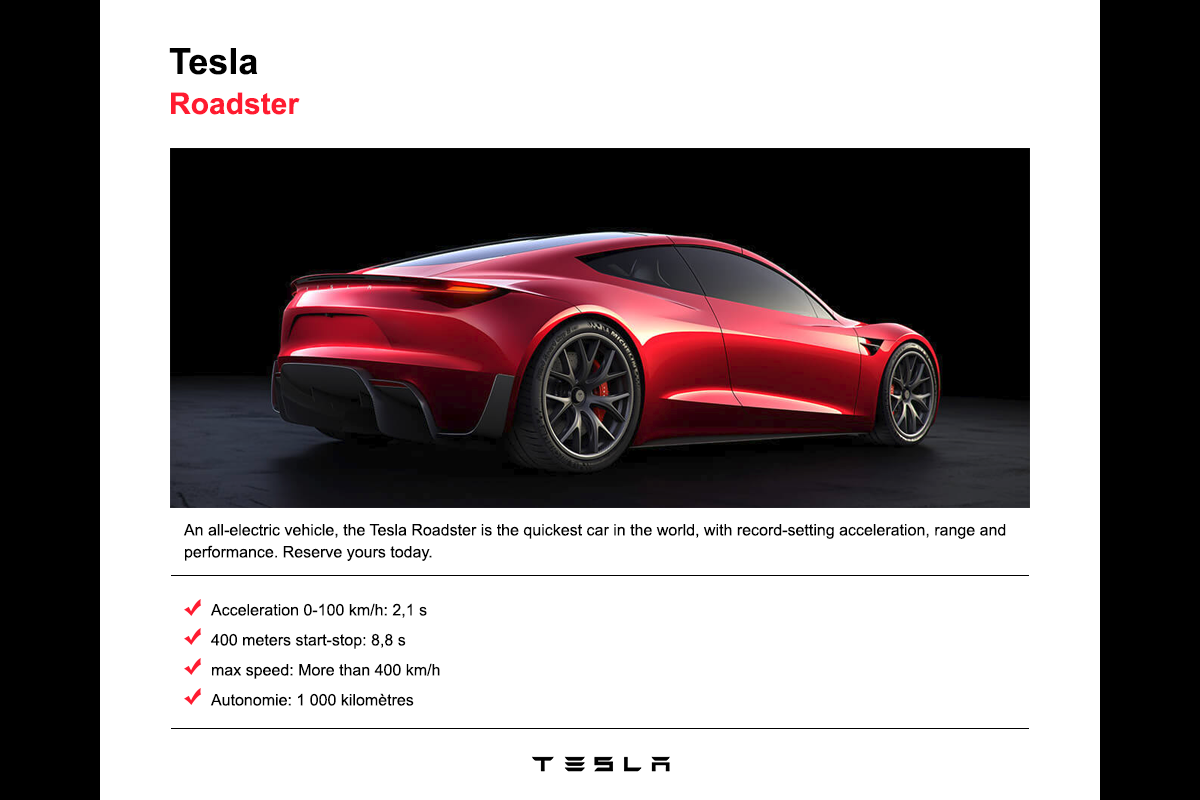
<style>
.page{position:relative;width:1200px;height:800px;background:#ffffff}
.page>*{position:absolute;margin:0}
.t1{font:16px/22px "ArialMT";color:#000000}
.t2{font:16px/30px "ArialMT";color:#000000}
</style>
<div class="page">
<p class="t1" style="left:183px;top:524px;width:823px;height:37px">An all-electric vehicle, the Tesla Roadster is the quickest car in the world, with record-setting acceleration, range and performance. Reserve yours today.</p>
<p class="t2" style="left:210px;top:603px;width:230px;height:103px">Acceleration 0-100 km/h: 2,1 s<br>400 meters start-stop: 8,8 s<br>max speed: More than 400 km/h<br>Autonomie: 1 000 kilomètres</p>
</div>
